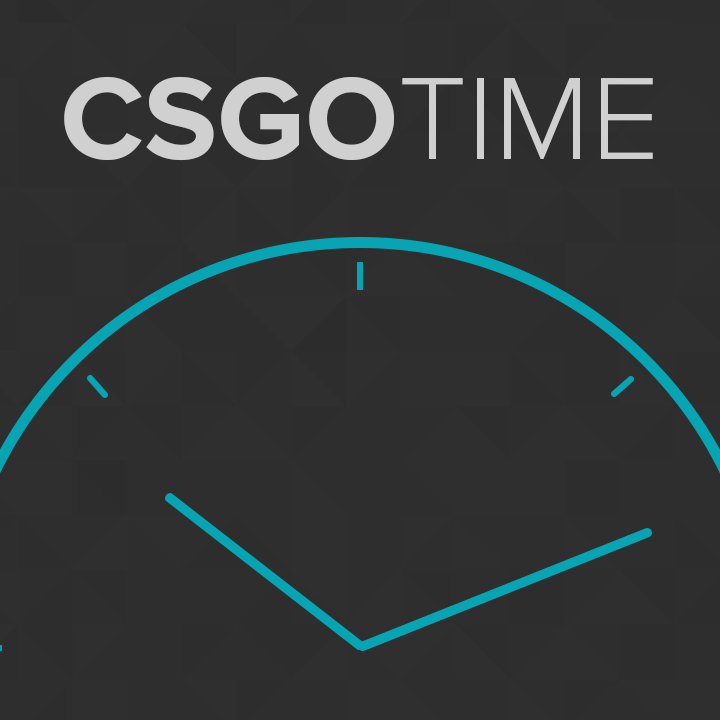
<style>
.page{position:relative;width:720px;height:720px;background:#2e2e2e}
.page>*{position:absolute;margin:0}
.t1{font:122px "ProximaNova-Bold";color:#d0d0d0}
.t2{font:122px "ProximaNova-Light";color:#d0d0d0}
</style>
<div class="page">
<p class="t1" style="left:64px;top:76px;width:589px;height:85px">CSGO<span class="t2">TIME</span></p>
</div>
